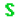
<style>
.page{position:relative;width:19px;height:19px;background:#ffffff}
.page>*{position:absolute;margin:0}
.t1{font:18px "Fixedsys";color:#00cf1d;font-weight:bold}
</style>
<div class="page">
<p class="t1" style="left:5px;top:3px;width:10px;height:14px">S</p>
</div>
